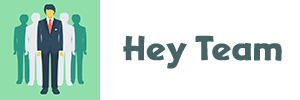
<style>
.page{position:relative;width:300px;height:100px;background:#ffffff}
.page>*{position:absolute;margin:0}
.t1{font:30px "Adventuring";letter-spacing:-0.02em;color:#466365}
</style>
<div class="page">
<p class="t1" style="left:123px;top:35px;width:159px;height:34px">Hey Team</p>
</div>
